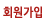
<style>
.page{position:relative;width:45px;height:23px;background:#ffffff}
.page>*{position:absolute;margin:0}
.t1{font:12px "NanumGothicBold";color:#ae1c17;font-weight:bold;scale:0.87 1}
</style>
<div class="page">
<p class="t1" style="left:3px;top:6px;width:39px;height:12px">회원가입</p>
</div>
